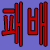
<style>
.page{position:relative;width:50px;height:50px;background:#6d67ca}
.page>*{position:absolute;margin:0}
.t1{font:50px "DotumChe";color:#c40000;scale:0.5 1}
</style>
<div class="page">
<p class="t1" style="left:2px;top:2px;width:45px;height:44px">패배</p>
</div>
